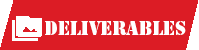
<style>
.page{position:relative;width:199px;height:50px;background:#dc1c25}
.page>*{position:absolute;margin:0}
.t1{font:18px "StencilStd";color:#ffffff}
</style>
<div class="page">
<p class="t1" style="left:45px;top:21px;width:141px;height:14px">DELIVERABLES</p>
</div>
